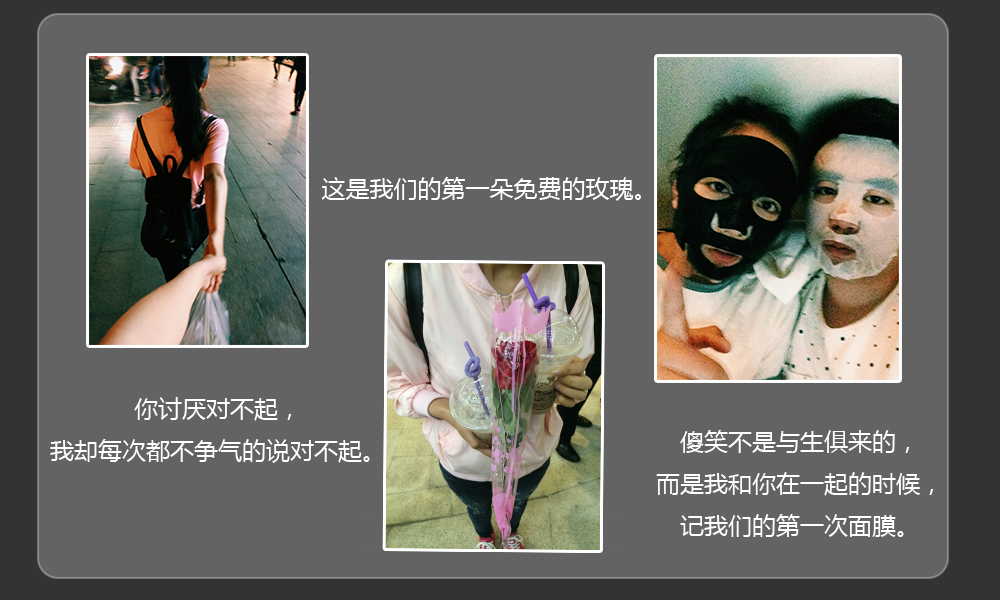
<style>
.page{position:relative;width:1000px;height:600px;background:#636363}
.page>*{position:absolute;margin:0}
.t1{font:24px "MicrosoftYaHei";color:#ffffff}
</style>
<div class="page">
<p class="t1" style="left:321px;top:177px;width:320px;height:24px">这是我们的第一朵免费的玫瑰。</p>
<p class="t1" style="left:50px;top:397px;width:320px;height:66px;text-align:center">你讨厌对不起，<br>我却每次都不争气的说对不起。</p>
<p class="t1" style="left:656px;top:430px;width:278px;height:107px;text-align:center">傻笑不是与生俱来的，<br>而是我和你在一起的时候，<br>记我们的第一次面膜。</p>
</div>
